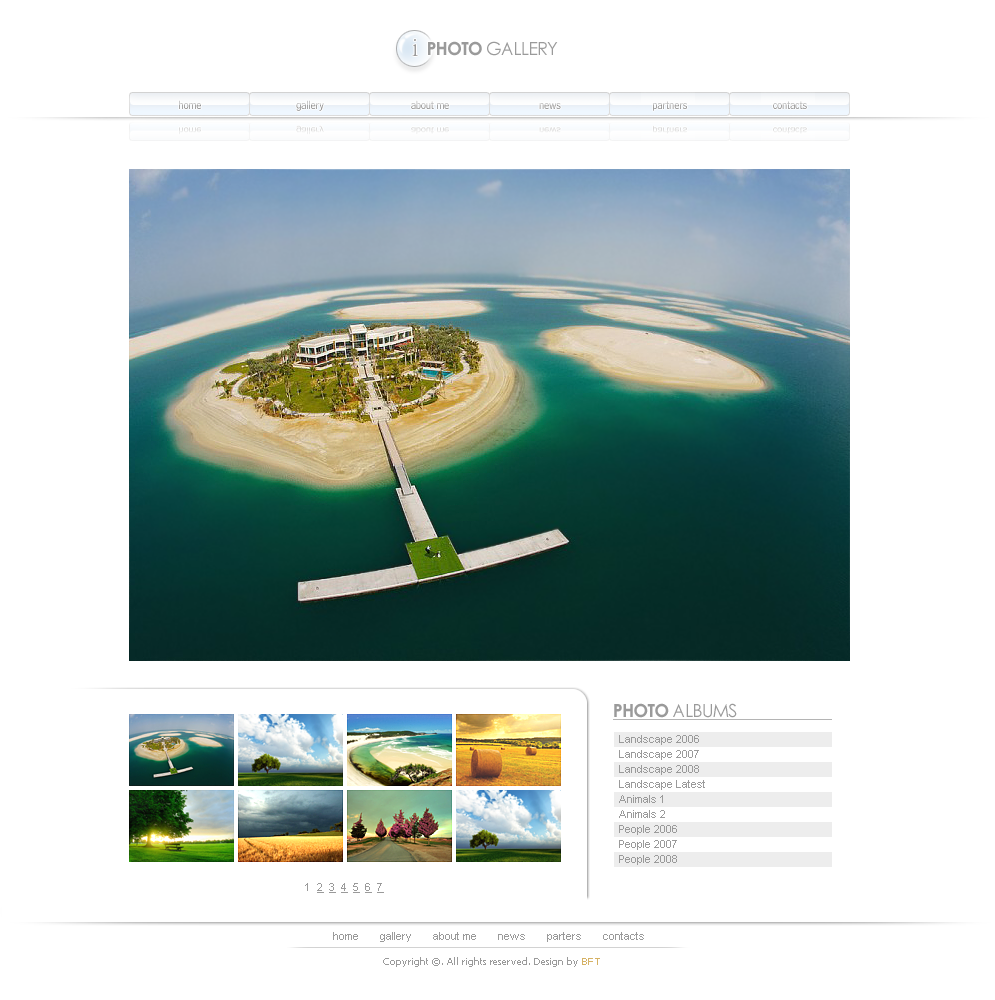
<style>
.page{position:relative;width:995px;height:1000px;background:#ffffff}
.page>*{position:absolute;margin:0}
.t1{font:30px "ArnoPro-LightDisplay";letter-spacing:-0.025em;color:#9a9a9a}
.t2{font:18px "CenturyGothic";letter-spacing:-0.05em;color:#9a9a9a;text-transform:uppercase}
.t3{font:18px "CenturyGothic-Bold";letter-spacing:-0.05em;color:#9a9a9a;text-transform:uppercase}
.t4{font:12px "BellCentennialBT-Address";letter-spacing:-0.025em}
.t5{font:11px "ArialMT";color:#9a9a9a}
.t6{font:11px "ArialMT";color:#9a9a9a;text-decoration:underline}
.t7{font:10px "Tahoma";color:#9a9a9a}
.t8{font:10px "Tahoma";color:#d6b265}
</style>
<div class="page">
<p class="t1" style="left:412px;top:39px;width:6px;height:17px">i</p>
<p class="t2" style="left:428px;top:41px;width:130px;height:15px"><span class="t3">photo</span> gallery</p>
<p class="t4" style="left:179px;top:100px;width:22px;height:9px">home</p>
<p class="t4" style="left:296px;top:100px;width:28px;height:11px">gallery</p>
<p class="t4" style="left:411px;top:100px;width:38px;height:9px">about me</p>
<p class="t4" style="left:653px;top:101px;width:34px;height:10px">partners</p>
<p class="t4" style="left:773px;top:101px;width:34px;height:8px">contacts</p>
<p class="t4" style="left:539px;top:103px;width:22px;height:6px">news</p>
<p class="t2" style="left:614px;top:703px;width:123px;height:15px"><span class="t3">photo</span> albums</p>
<p class="t5" style="left:619px;top:735px;width:80px;height:10px">Landscape 2006</p>
<p class="t5" style="left:619px;top:750px;width:80px;height:10px">Landscape 2007</p>
<p class="t5" style="left:619px;top:765px;width:80px;height:10px">Landscape 2008</p>
<p class="t5" style="left:619px;top:780px;width:86px;height:10px">Landscape Latest</p>
<p class="t5" style="left:619px;top:795px;width:44px;height:8px">Animals 1</p>
<p class="t5" style="left:619px;top:810px;width:46px;height:8px">Animals 2</p>
<p class="t5" style="left:619px;top:825px;width:58px;height:10px">People 2006</p>
<p class="t5" style="left:619px;top:840px;width:58px;height:10px">People 2007</p>
<p class="t5" style="left:619px;top:855px;width:58px;height:10px">People 2008</p>
<p class="t6" style="left:305px;top:883px;width:79px;height:10px"><span class="t5">1  </span>2  3  4  5  6  7</p>
<p class="t5" style="left:333px;top:932px;width:311px;height:10px">home       gallery       about me       news       parters       contacts</p>
<p class="t7" style="left:383px;top:957px;width:217px;height:10px">Copyright ©. All rights reserved. Design by <span class="t8">BFT</span></p>
</div>
